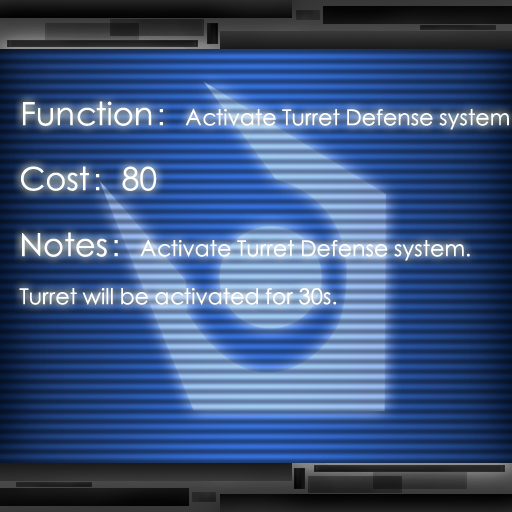
<style>
.page{position:relative;width:512px;height:512px}
.page>*{position:absolute;margin:0}
.t1{font:22px "STXihei";color:#ffffff}
.t2{font:32px "STXihei";color:#ffffff}
</style>
<div class="page">
<p class="t1" style="left:23px;top:101px;width:486px;height:29px"><span class="t2">Function：</span>Activate Turret Defense system</p>
<p class="t2" style="left:21px;top:166px;width:136px;height:25px">Cost：80</p>
<p class="t1" style="left:19px;top:232px;width:451px;height:73px"><span class="t2">Notes：</span>Activate Turret Defense system.<br>Turret will be activated for 30s.</p>
</div>
